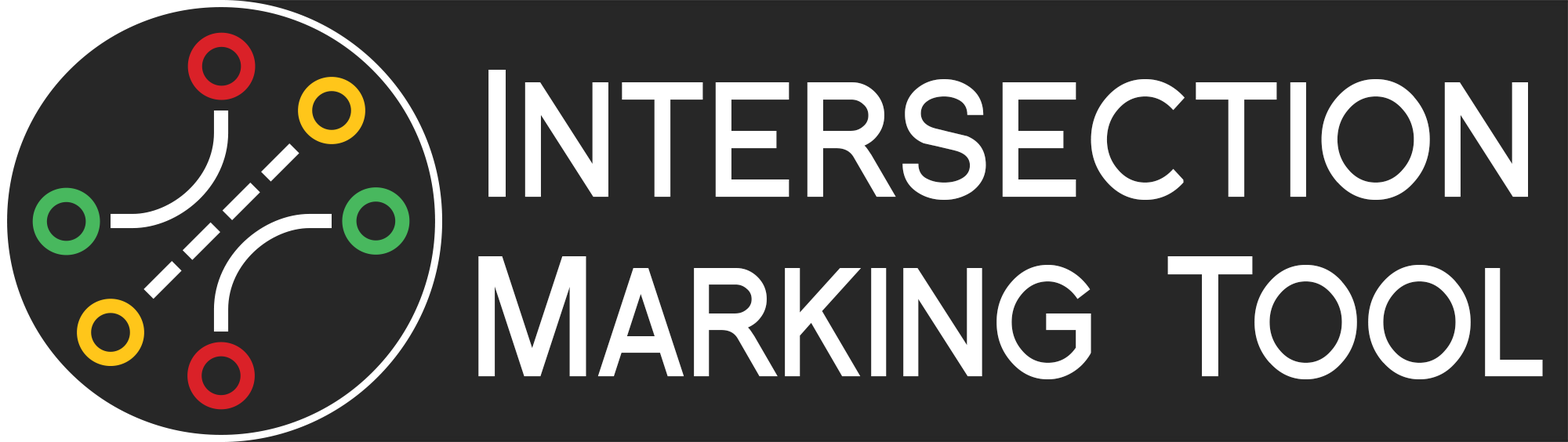
<style>
.page{position:relative;width:1568px;height:442px;background:#272727}
.page>*{position:absolute;margin:0}
.t1{font:176.2px/179.4px "FlorencesansSC-Bold";color:#ffffff;scale:0.9 1}
.t2{font:166.6px/179.4px "FlorencesansSC-Bold";color:#ffffff;scale:0.9 1}
</style>
<div class="page">
<p class="t1" style="left:478px;top:70px;width:1065px;height:309px;text-align:center">Intersection<br><span class="t2">Marking Tool</span></p>
</div>
